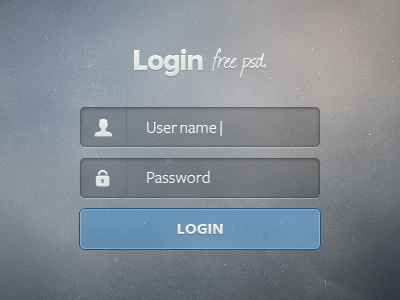
<style>
.page{position:relative;width:400px;height:300px}
.page>*{position:absolute;margin:0}
.t1{font:30px "ProximaNova-Extrabld";letter-spacing:-0.04em;color:#dddddb}
.t2{font:30px "Journal";letter-spacing:-0.04em;color:#dddddb}
.t3{font:17px/50px "FreightSansBook";color:#ffffff}
.t4{font:16px "FreightSansBold";color:#e7e7e6}
</style>
<div class="page">
<p class="t1" style="left:134px;top:49px;width:69px;height:27px">Login</p>
<p class="t2" style="left:212px;top:48px;width:54px;height:30px">free psd.</p>
<p class="t3" style="left:147px;top:121px;width:75px;height:62px">User name |<br>Password</p>
<p class="t4" style="left:177px;top:224px;width:46px;height:10px">LOGIN</p>
</div>
